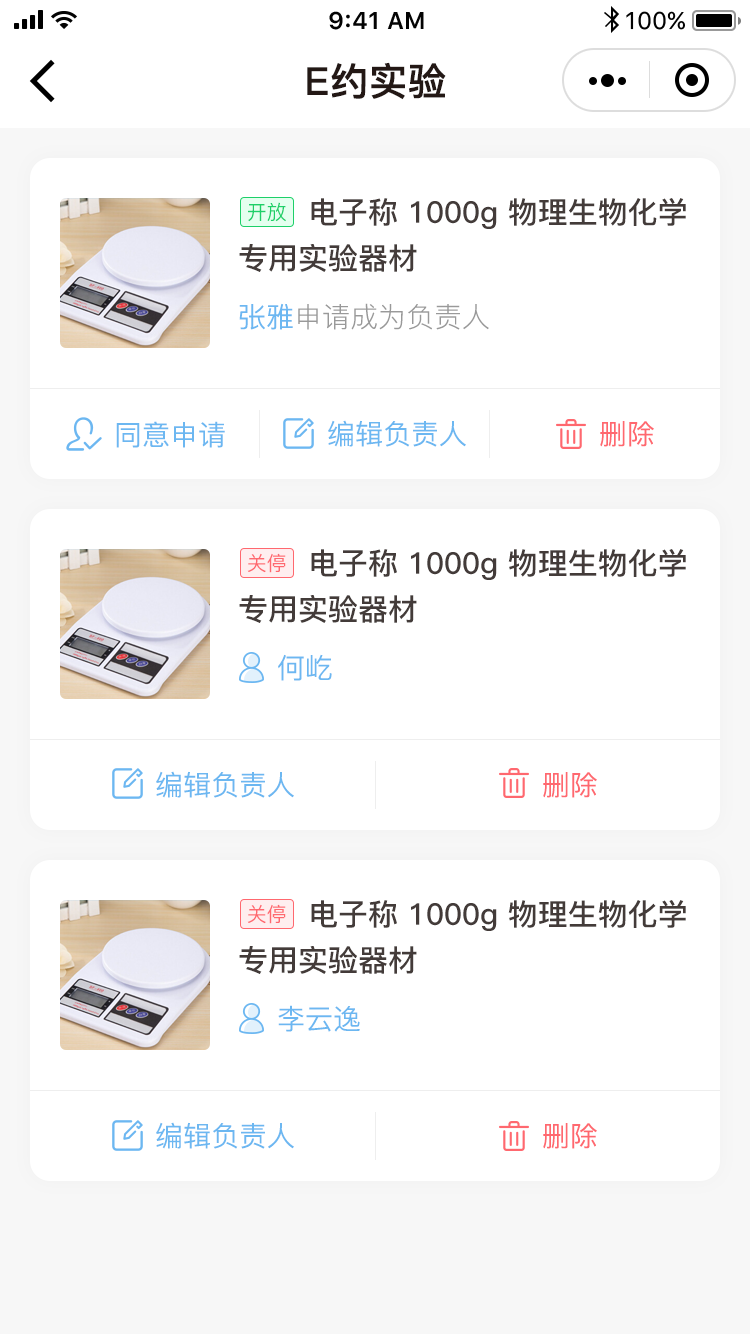
<style>
.page{position:relative;width:750px;height:1334px;background:#ffffff}
.page>*{position:absolute;margin:0}
.t1{font:38px "PingFang-SC-Bold";color:#231815;font-weight:bold}
.t2{font:30px/46px "PingFang-SC-Bold";color:#433b39}
.t3{font:20px "PingFang-SC-Medium";color:#1dd069}
.t4{font:28px "PingFang-SC-Regular";color:#999999}
.t5{font:28px "PingFang-SC-Medium";color:#6cb7f1}
.t6{font:28px "PingFang-SC-Medium";color:#ff686f}
.t7{font:20px "PingFang-SC-Medium";color:#ff686f}
</style>
<div class="page">
<p class="t1" style="left:307px;top:62px;width:139px;height:38px">E约实验</p>
<p class="t2" style="left:239px;top:198px;width:447px;height:74px">电子称 1000g 物理生物化学<br>专用实验器材</p>
<p class="t3" style="left:248px;top:202px;width:38px;height:20px">开放</p>
<p class="t4" style="left:239px;top:303px;width:250px;height:27px"><span class="t5">张雅</span>申请成为负责人</p>
<p class="t5" style="left:116px;top:421px;width:109px;height:27px">同意申请</p>
<p class="t5" style="left:328px;top:420px;width:138px;height:27px">编辑负责人</p>
<p class="t6" style="left:600px;top:421px;width:54px;height:26px">删除</p>
<p class="t2" style="left:239px;top:549px;width:447px;height:74px">电子称 1000g 物理生物化学<br>专用实验器材</p>
<p class="t7" style="left:247px;top:553px;width:39px;height:20px">关停</p>
<p class="t5" style="left:278px;top:654px;width:54px;height:27px">何屹</p>
<p class="t5" style="left:156px;top:771px;width:138px;height:27px">编辑负责人</p>
<p class="t6" style="left:543px;top:772px;width:54px;height:26px">删除</p>
<p class="t2" style="left:239px;top:900px;width:447px;height:74px">电子称 1000g 物理生物化学<br>专用实验器材</p>
<p class="t7" style="left:247px;top:904px;width:39px;height:20px">关停</p>
<p class="t5" style="left:278px;top:1005px;width:82px;height:27px">李云逸</p>
<p class="t5" style="left:156px;top:1122px;width:138px;height:27px">编辑负责人</p>
<p class="t6" style="left:543px;top:1123px;width:54px;height:26px">删除</p>
</div>
